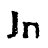
<style>
.page{position:relative;width:48px;height:48px;background:#ffffff}
.page>*{position:absolute;margin:0}
.t1{font:41.7px "SanBgB";color:#000000}
</style>
<div class="page">
<p class="t1" style="left:7px;top:10px;width:33px;height:29px">Jn</p>
</div>
